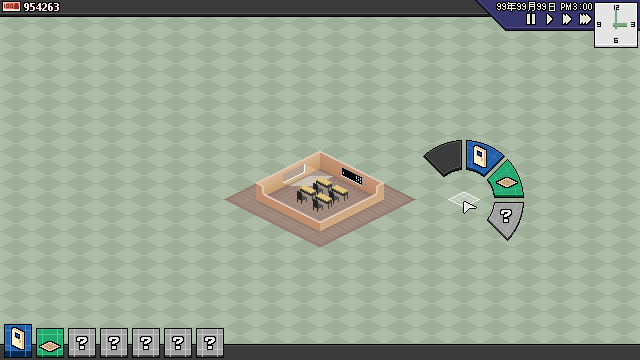
<style>
.page{position:relative;width:640px;height:360px;background:#abbba6}
.page>*{position:absolute;margin:0}
.t1{font:11px "MicrosoftTaiLe-Bold";color:#fee6e2}
.t2{font:10px "ZpixEX2"}
.t3{font:24px "BankGothicBT-Medium";color:#e2e2e2}
</style>
<div class="page">
<p class="t1" style="left:24px;top:3px;width:35px;height:8px">954263</p>
<p class="t2" style="left:497px;top:2px;width:95px;height:9px">99年99月99日  PM 3:00</p>
<p class="t3" style="left:501px;top:210px;width:10px;height:12px">?</p>
<p class="t3" style="left:77px;top:337px;width:10px;height:12px">?</p>
<p class="t3" style="left:109px;top:337px;width:10px;height:12px">?</p>
<p class="t3" style="left:141px;top:337px;width:10px;height:12px">?</p>
<p class="t3" style="left:173px;top:337px;width:10px;height:12px">?</p>
<p class="t3" style="left:205px;top:337px;width:10px;height:12px">?</p>
</div>
